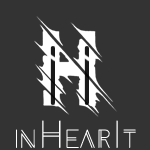
<style>
.page{position:relative;width:150px;height:150px;background:#333333}
.page>*{position:absolute;margin:0}
.t1{font:22.6px "Anders";color:#ffffff}
.t2{font:33.9px "Anders";color:#ffffff}
</style>
<div class="page">
<p class="t1" style="left:16px;top:120px;width:120px;height:28px">in<span class="t2">H</span>ear<span class="t2">I</span>t</p>
</div>
